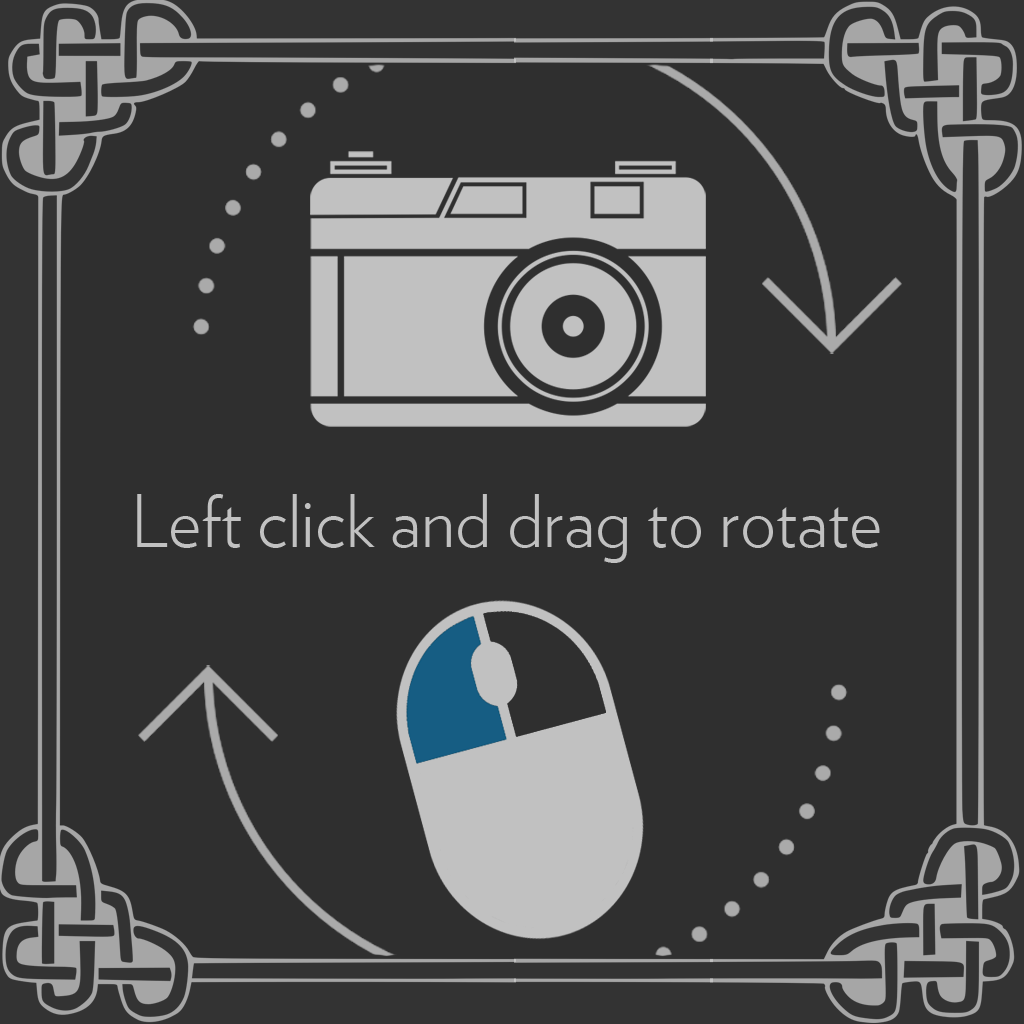
<style>
.page{position:relative;width:1024px;height:1024px;background:#2f2f2f}
.page>*{position:absolute;margin:0}
.t1{font:72px "Verlag-Light";color:#c1c1c1}
</style>
<div class="page">
<p class="t1" style="left:137px;top:494px;width:743px;height:69px">Left click and drag to rotate</p>
</div>
